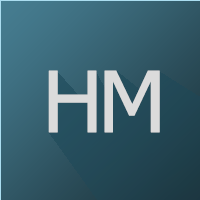
<style>
.page{position:relative;width:200px;height:200px}
.page>*{position:absolute;margin:0}
.t1{font:84px "Verdana";letter-spacing:-0.115em;color:#dadada;font-weight:bold}
</style>
<div class="page">
<p class="t1" style="left:48px;top:70px;width:112px;height:63px">HM</p>
</div>
